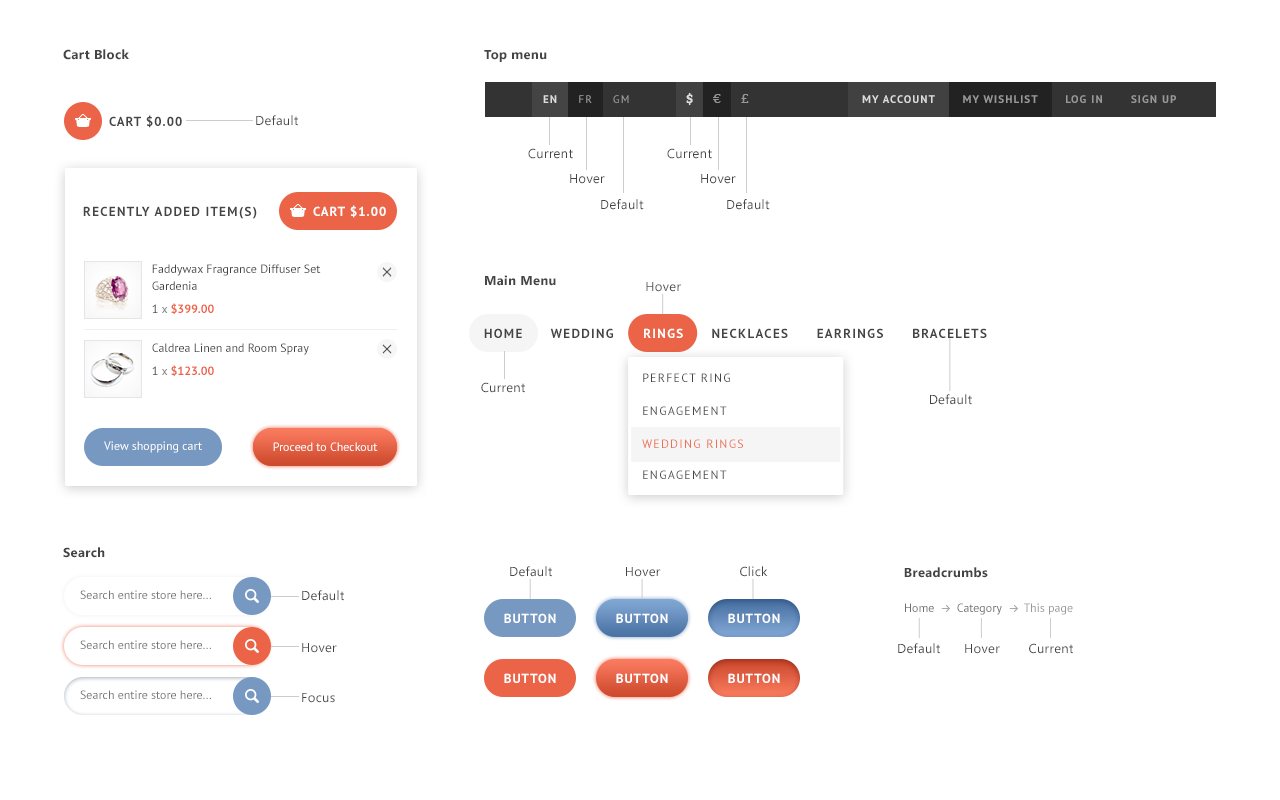
<style>
.page{position:relative;width:1280px;height:800px;background:#ffffff}
.page>*{position:absolute;margin:0}
.t1{font:13px "SegoeUI-Bold";letter-spacing:0.025em;color:#444444}
.t2{font:11px "PTSans-Regular";letter-spacing:0.1em;color:#999999}
.t3{font:11px "PTSans-Bold";letter-spacing:0.1em;color:#dddddd}
.t4{font:13px "Bitter-Regular";letter-spacing:0.118em;color:#999999}
.t5{font:13px "Bitter-Bold";letter-spacing:0.118em;color:#dddddd}
.t6{font:11px "PTSans-Bold";letter-spacing:0.1em;color:#999999;text-transform:uppercase}
.t7{font:11px "PTSans-Bold";letter-spacing:0.1em;color:#dddddd;text-transform:uppercase}
.t8{font:13px "PTSans-Bold";letter-spacing:0.075em;color:#444444;text-transform:uppercase}
.t9{font:13px "SegoeUI";letter-spacing:0.025em;color:#444444}
.t10{font:13px "PTSans-Bold";letter-spacing:0.1em;color:#444444;text-transform:uppercase}
.t11{font:13px "PTSans-Bold";letter-spacing:0.075em;color:#ffffff;text-transform:uppercase}
.t12{font:12px/17px "PTSans-Regular";color:#444444}
.t13{font:12px "PTSans-Bold";color:#eb6447}
.t14{font:12px "PTSans-Regular";color:#444444}
.t15{font:12px "PTSans-Regular";color:#777777}
.t16{font:13px "PTSans-Bold";letter-spacing:0.1em;color:#ffffff;text-transform:uppercase}
.t17{font:12px "PTSans-Regular";letter-spacing:0.1em;color:#444444;text-transform:uppercase}
.t18{font:12px "PTSans-Regular";color:#fefefe}
.t19{font:12px "PTSans-Regular";letter-spacing:0.1em;color:#ec6f54;text-transform:uppercase}
.t20{font:12px "PTSans-Regular";color:#707070}
.t21{font:12px "PTSans-Regular";color:#999999}
</style>
<div class="page">
<p class="t1" style="left:63px;top:49px;width:66px;height:11px">Cart Block</p>
<p class="t1" style="left:484px;top:50px;width:63px;height:12px">Top menu</p>
<p class="t2" style="left:543px;top:95px;width:86px;height:8px"><span class="t3">EN     </span>FR     GM</p>
<p class="t4" style="left:686px;top:92px;width:63px;height:14px"><span class="t5">$    </span>€    £</p>
<p class="t6" style="left:862px;top:95px;width:314px;height:8px"><span class="t7">My Account </span>      My Wishlist       Log In       Sign Up</p>
<p class="t8" style="left:109px;top:115px;width:73px;height:13px">Cart $0.00</p>
<p class="t9" style="left:256px;top:115px;width:42px;height:11px">Default</p>
<p class="t9" style="left:528px;top:148px;width:45px;height:11px">Current</p>
<p class="t9" style="left:667px;top:148px;width:45px;height:11px">Current</p>
<p class="t9" style="left:570px;top:174px;width:35px;height:10px">Hover</p>
<p class="t9" style="left:701px;top:174px;width:35px;height:10px">Hover</p>
<p class="t10" style="left:83px;top:206px;width:174px;height:13px">Recently added item(s)</p>
<p class="t11" style="left:313px;top:205px;width:73px;height:13px">Cart $1.00</p>
<p class="t9" style="left:601px;top:199px;width:43px;height:11px">Default</p>
<p class="t9" style="left:727px;top:199px;width:43px;height:11px">Default</p>
<p class="t12" style="left:152px;top:264px;width:169px;height:26px">Faddywax Fragrance Diffuser Set <br>Gardenia</p>
<p class="t1" style="left:485px;top:275px;width:71px;height:11px">Main Menu</p>
<p class="t9" style="left:646px;top:282px;width:35px;height:10px">Hover</p>
<p class="t13" style="left:152px;top:303px;width:62px;height:11px"><span class="t14">1</span><span class="t15"> x </span>$399.00</p>
<p class="t10" style="left:484px;top:328px;width:503px;height:10px">home      WEDDING      RINGS      NECKLACES      EARRINGS      BRACELETS</p>
<p class="t16" style="left:644px;top:328px;width:39px;height:10px">RINGS</p>
<p class="t14" style="left:152px;top:343px;width:157px;height:12px">Caldrea Linen and Room Spray</p>
<p class="t13" style="left:152px;top:365px;width:62px;height:11px"><span class="t14">1</span><span class="t15"> x </span>$123.00</p>
<p class="t17" style="left:643px;top:373px;width:87px;height:9px">Perfect Ring</p>
<p class="t9" style="left:481px;top:382px;width:44px;height:11px">Current</p>
<p class="t9" style="left:930px;top:394px;width:42px;height:11px">Default</p>
<p class="t17" style="left:643px;top:406px;width:84px;height:9px">Engagement</p>
<p class="t18" style="left:104px;top:441px;width:98px;height:12px">View shopping cart</p>
<p class="t18" style="left:273px;top:442px;width:105px;height:9px">Proceed to Checkout</p>
<p class="t18" style="left:273px;top:442px;width:105px;height:9px">Proceed to Checkout</p>
<p class="t19" style="left:642px;top:439px;width:101px;height:9px">Wedding Rings</p>
<p class="t17" style="left:643px;top:470px;width:84px;height:9px">Engagement</p>
<p class="t1" style="left:63px;top:547px;width:42px;height:11px">Search</p>
<p class="t9" style="left:510px;top:566px;width:42px;height:11px">Default</p>
<p class="t9" style="left:626px;top:567px;width:35px;height:10px">Hover</p>
<p class="t9" style="left:740px;top:566px;width:28px;height:11px">Click</p>
<p class="t1" style="left:904px;top:567px;width:84px;height:11px">Breadcrumbs</p>
<p class="t15" style="left:80px;top:590px;width:131px;height:9px">Search entire store here...</p>
<p class="t9" style="left:302px;top:590px;width:42px;height:11px">Default</p>
<p class="t20" style="left:905px;top:603px;width:168px;height:12px">Home       Category       <span class="t21">This page</span></p>
<p class="t11" style="left:504px;top:613px;width:52px;height:10px">Button</p>
<p class="t11" style="left:616px;top:613px;width:52px;height:10px">Button</p>
<p class="t11" style="left:728px;top:613px;width:52px;height:10px">Button</p>
<p class="t15" style="left:80px;top:640px;width:131px;height:9px">Search entire store here...</p>
<p class="t9" style="left:302px;top:643px;width:35px;height:10px">Hover</p>
<p class="t9" style="left:898px;top:643px;width:42px;height:11px">Default</p>
<p class="t9" style="left:965px;top:644px;width:35px;height:10px">Hover</p>
<p class="t9" style="left:1029px;top:643px;width:44px;height:11px">Current</p>
<p class="t11" style="left:504px;top:673px;width:52px;height:10px">Button</p>
<p class="t11" style="left:616px;top:673px;width:52px;height:10px">Button</p>
<p class="t11" style="left:728px;top:673px;width:52px;height:10px">Button</p>
<p class="t15" style="left:80px;top:690px;width:131px;height:9px">Search entire store here...</p>
<p class="t9" style="left:302px;top:693px;width:33px;height:10px">Focus</p>
</div>
